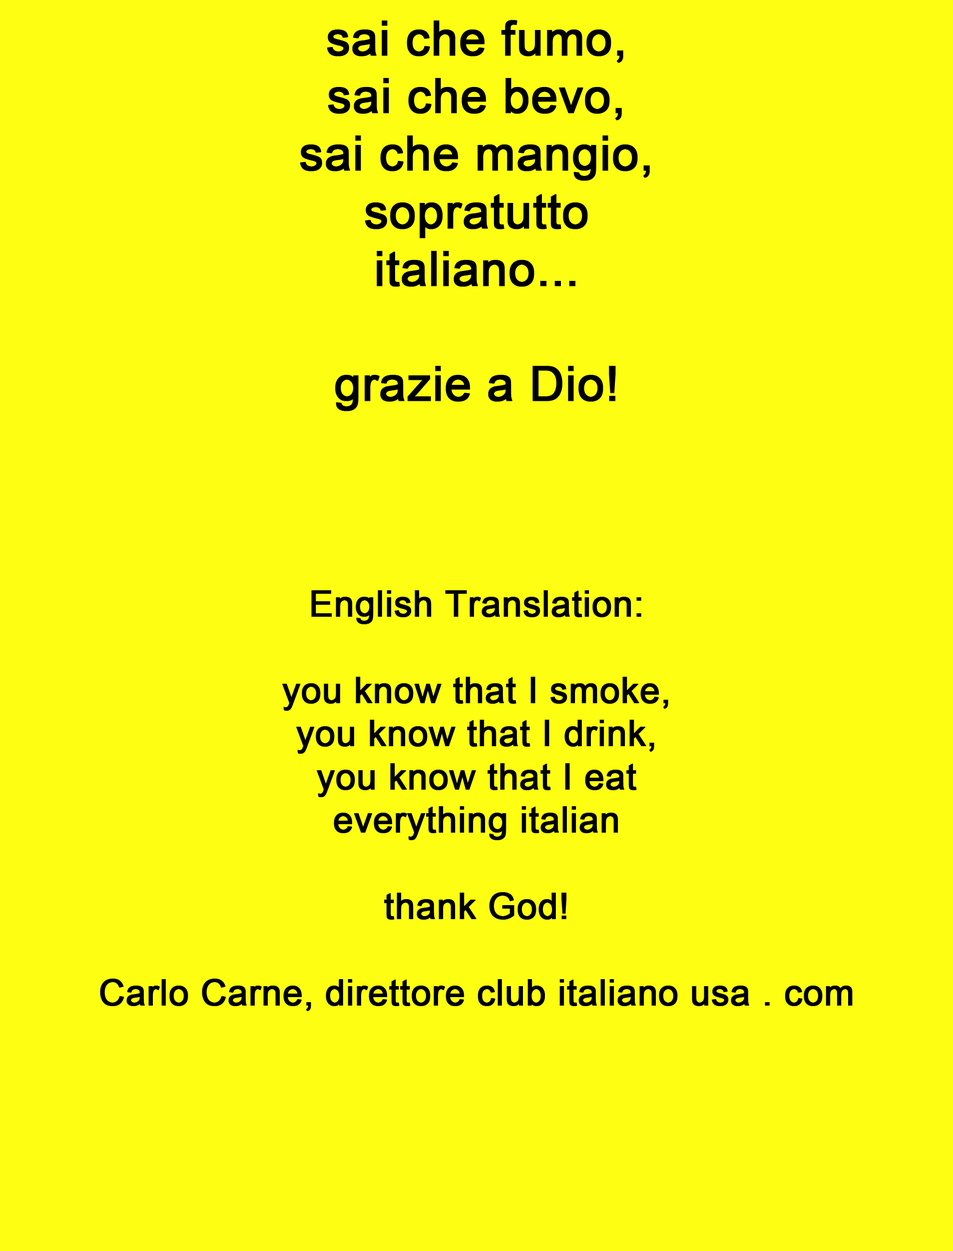
<style>
.page{position:relative;width:953px;height:1251px;background:#fefe12}
.page>*{position:absolute;margin:0}
.t1{font:36px "ArialMT";color:#000000;font-weight:bold}
.t2{font:48px "ArialMT";color:#000000;font-weight:bold}
</style>
<div class="page">
<p class="t1" style="left:100px;top:20px;width:753px;height:991px;text-align:center"><span class="t2">sai che fumo,<br>sai che bevo,<br>sai che mangio,<br>sopratutto<br>italiano...<br><br>grazie a Dio!<br><br><br><br></span>English Translation:<br><br>you know that I smoke,<br>you know that I drink,<br>you know that I eat<br>everything italian<br><br>thank God!<br><br>Carlo Carne, direttore club italiano usa . com</p>
</div>
